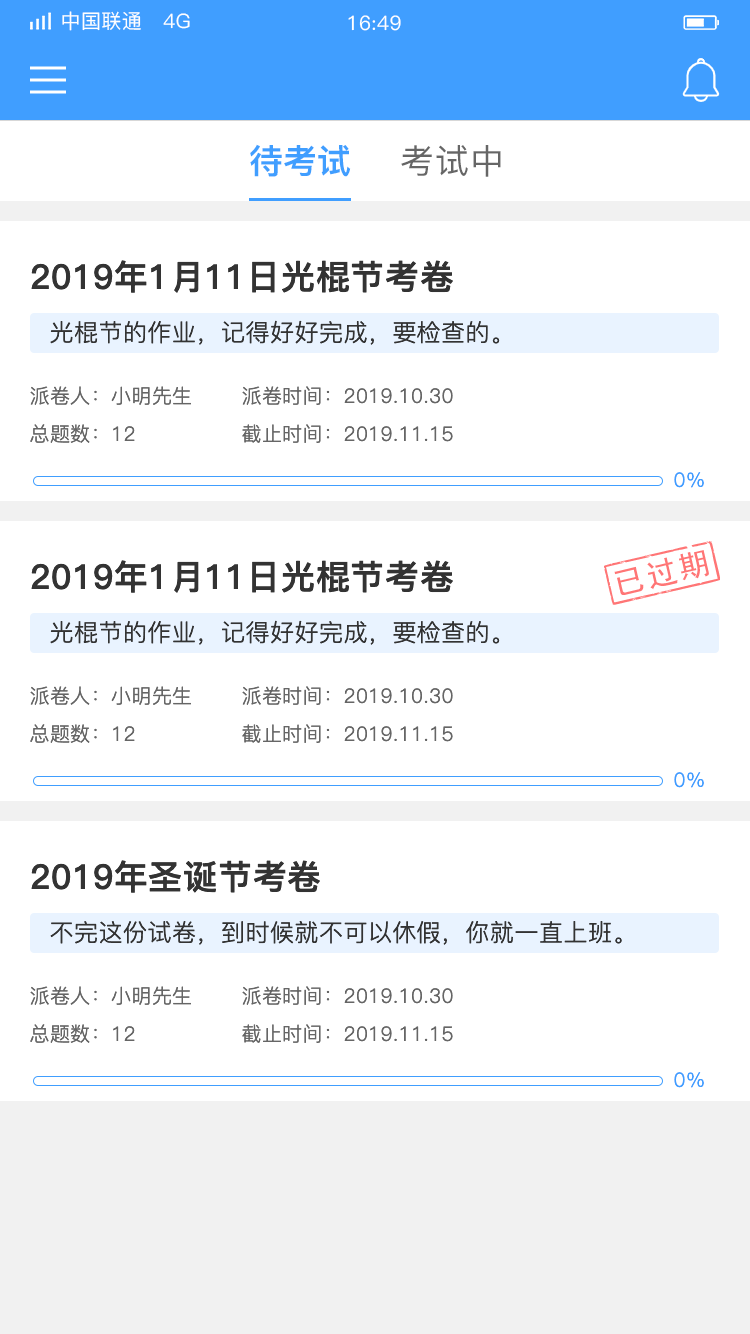
<style>
.page{position:relative;width:750px;height:1334px;background:#ffffff}
.page>*{position:absolute;margin:0}
.t1{font:20px "PingFang-SC-Medium";letter-spacing:0.02em;color:#ffffff}
.t2{font:34px "PingFang-SC-Heavy";color:#409eff}
.t3{font:34px "PingFang-SC-Medium";letter-spacing:0.02em;color:#666666}
.t4{font:34px "PingFang-SC-Bold";letter-spacing:0.02em;color:#333333}
.t5{font:24px "PingFang-SC-Regular";letter-spacing:0.02em;color:#333333}
.t6{font:20px "PingFang-SC-Regular";letter-spacing:0.02em;color:#666666}
.t7{font:20px "PingFang-SC-Regular";letter-spacing:0.02em;color:#409eff}
</style>
<div class="page">
<p class="t1" style="left:62px;top:11px;width:128px;height:20px">中国联通   4G</p>
<p class="t1" style="left:348px;top:15px;width:53px;height:16px">16:49</p>
<p class="t2" style="left:250px;top:144px;width:101px;height:33px">待考试</p>
<p class="t3" style="left:401px;top:145px;width:100px;height:32px">考试中</p>
<p class="t4" style="left:31px;top:260px;width:422px;height:33px">2019年1月11日光棍节考卷</p>
<p class="t5" style="left:50px;top:320px;width:450px;height:25px">光棍节的作业，记得好好完成，要检查的。</p>
<p class="t6" style="left:30px;top:386px;width:161px;height:19px">派卷人：小明先生</p>
<p class="t6" style="left:242px;top:386px;width:211px;height:19px">派卷时间：2019.10.30</p>
<p class="t6" style="left:30px;top:424px;width:105px;height:19px">总题数：12</p>
<p class="t6" style="left:242px;top:424px;width:211px;height:19px">截止时间：2019.11.15</p>
<p class="t7" style="left:674px;top:472px;width:30px;height:16px">0%</p>
<p class="t4" style="left:31px;top:560px;width:422px;height:33px">2019年1月11日光棍节考卷</p>
<p class="t5" style="left:50px;top:620px;width:450px;height:25px">光棍节的作业，记得好好完成，要检查的。</p>
<p class="t6" style="left:30px;top:686px;width:161px;height:19px">派卷人：小明先生</p>
<p class="t6" style="left:242px;top:686px;width:211px;height:19px">派卷时间：2019.10.30</p>
<p class="t6" style="left:30px;top:724px;width:105px;height:19px">总题数：12</p>
<p class="t6" style="left:242px;top:724px;width:211px;height:19px">截止时间：2019.11.15</p>
<p class="t7" style="left:674px;top:772px;width:30px;height:16px">0%</p>
<p class="t4" style="left:31px;top:860px;width:289px;height:33px">2019年圣诞节考卷</p>
<p class="t5" style="left:50px;top:921px;width:572px;height:24px">不完这份试卷，到时候就不可以休假，你就一直上班。</p>
<p class="t6" style="left:30px;top:986px;width:161px;height:19px">派卷人：小明先生</p>
<p class="t6" style="left:242px;top:986px;width:211px;height:19px">派卷时间：2019.10.30</p>
<p class="t6" style="left:30px;top:1024px;width:105px;height:19px">总题数：12</p>
<p class="t6" style="left:242px;top:1024px;width:211px;height:19px">截止时间：2019.11.15</p>
<p class="t7" style="left:674px;top:1072px;width:30px;height:16px">0%</p>
</div>
